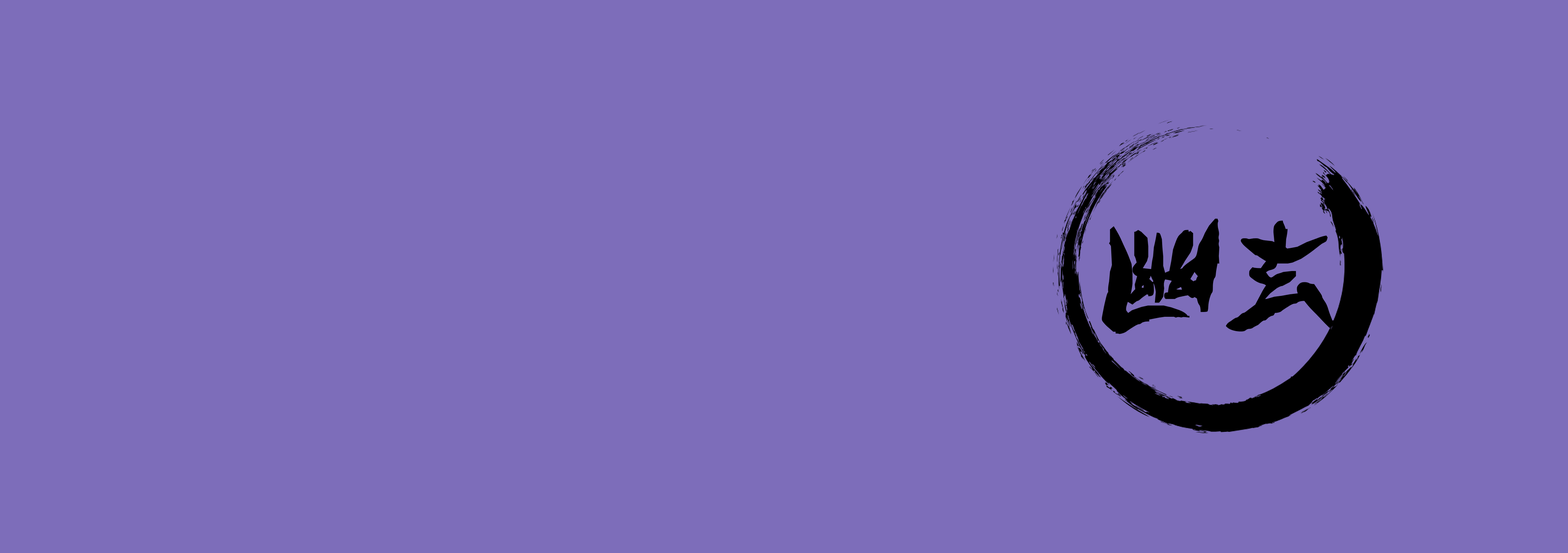
<style>
.page{position:relative;width:1568px;height:553px;background:#7d6dba}
.page>*{position:absolute;margin:0}
.t1{font:119.6px "ZinHenaBokuryu-RCF";color:#000000}
</style>
<div class="page">
<p class="t1" style="left:1102px;top:219px;width:232px;height:115px">幽玄</p>
</div>
